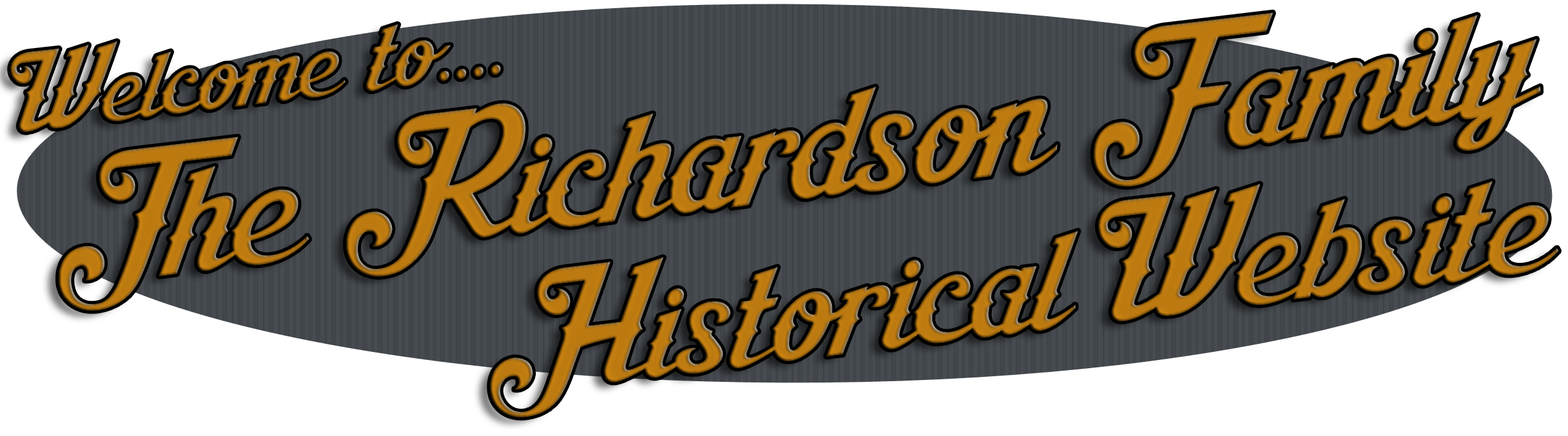
<style>
.page{position:relative;width:1568px;height:436px;background:#ffffff}
.page>*{position:absolute;margin:0}
.t1{font:132.5px "AishaScript"}
.t2{font:80.9px "AishaScript"}
.t3{font:122.6px "AishaScript"}
</style>
<div class="page">
<p class="t1" style="left:9px;top:12px;width:1550px;height:406px;rotate:-7deg"><span class="t2">Welcome to....<br></span>The Richardson Family <span class="t3">Historical Website</span></p>
</div>
